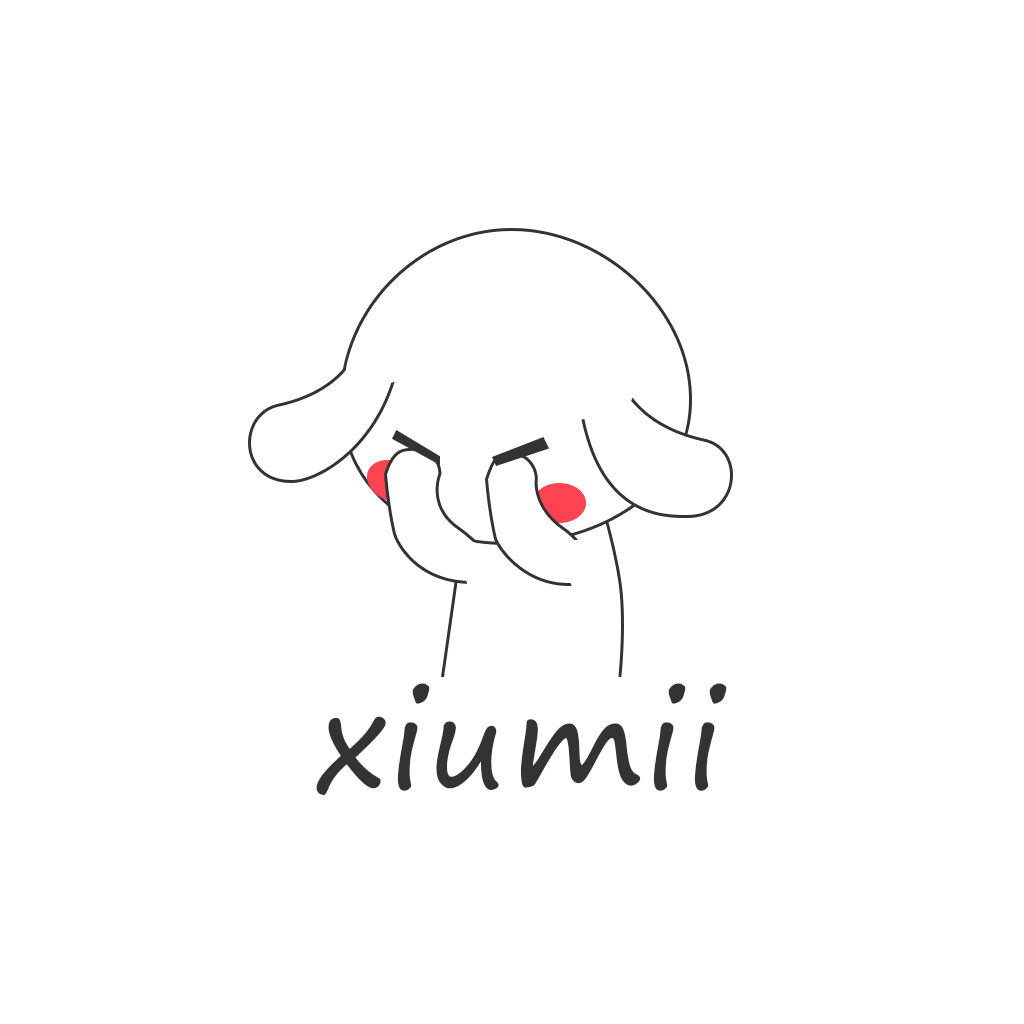
<style>
.page{position:relative;width:1024px;height:1024px;background:#ffffff}
.page>*{position:absolute;margin:0}
.t1{font:127.6px "SegoePrint";color:#333333;font-weight:bold}
</style>
<div class="page">
<p class="t1" style="left:316px;top:683px;width:411px;height:113px">xiumii</p>
</div>
